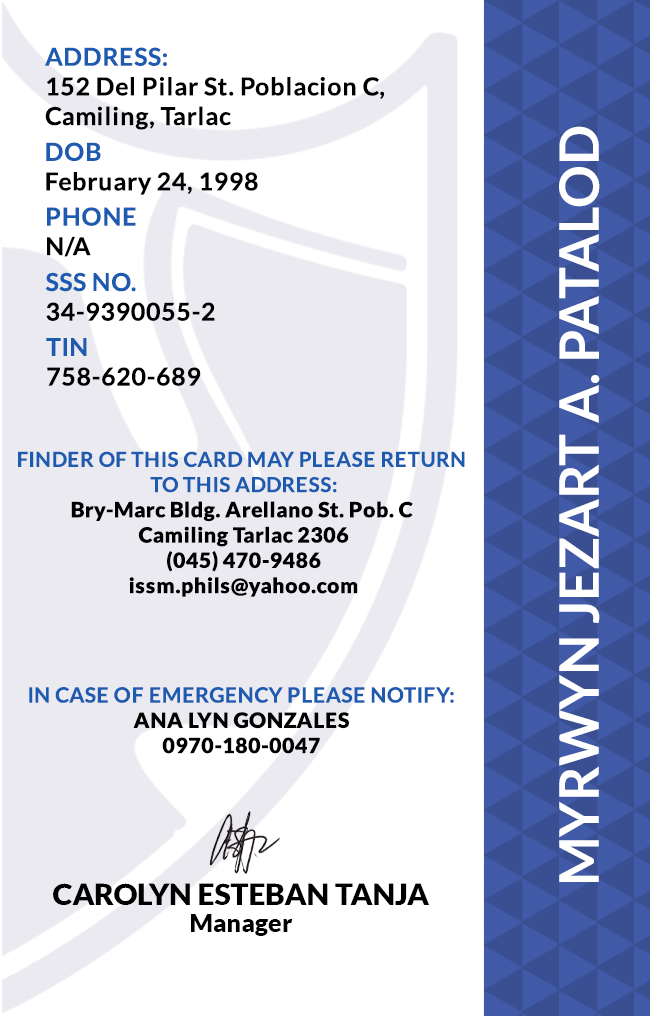
<style>
.page{position:relative;width:650px;height:1016px;background:#ffffff}
.page>*{position:absolute;margin:0}
.t1{font:24.7px/29.6px "Lato-Bold";letter-spacing:0.025em;color:#000000}
.t2{font:24.7px/29.6px "Lato-Bold";letter-spacing:0.025em;color:#1c5bb0}
.t3{font:54.2px "Lato-Bold";color:#ffffff}
.t4{font:24.7px/29.6px "Lato-Bold";letter-spacing:0.025em;color:#202627}
.t5{font:24.7px/29.6px "Lato-Bold";letter-spacing:0.025em}
.t6{font:21.1px "Lato-Black";letter-spacing:0.025em}
.t7{font:20.5px/25.3px "Lato-Bold";letter-spacing:0.025em;text-transform:uppercase}
.t8{font:21.1px/25.3px "Lato-Bold";letter-spacing:0.025em}
.t9{font:29.5px "Lato-Black";color:#000000}
.t10{font:25px "Lato-Black";color:#000000}
</style>
<div class="page">
<p class="t1" style="left:45px;top:47px;width:340px;height:83px"><span class="t2">ADDRESS:<br></span>152 Del Pilar St. Poblacion C, <br>Camiling, Tarlac</p>
<p class="t3" style="left:559px;top:126px;width:41px;height:756px;rotate:-90deg">MYRWYN JEZART A. PATALOD</p>
<p class="t1" style="left:46px;top:142px;width:212px;height:53px">DOB<br>February 24, 1998</p>
<p class="t2" style="left:47px;top:207px;width:89px;height:50px">PHONE <br><span class="t4">N/A</span></p>
<p class="t5" style="left:45px;top:272px;width:170px;height:49px">SSS NO.<br>34-9390055-2</p>
<p class="t1" style="left:46px;top:338px;width:155px;height:48px">TIN<br>758-620-689</p>
<p class="t6" style="left:18px;top:451px;width:447px;height:146px;text-align:center"><span class="t7">Finder of this card may please return <br>to this address:<br></span>Bry-Marc Bldg. Arellano St. Pob. C <br>Camiling Tarlac 2306<br>(045) 470-9486<br>issm.phils@yahoo.com</p>
<p class="t8" style="left:29px;top:687px;width:425px;height:67px;text-align:center">IN CASE OF EMERGENCY PLEASE NOTIFY:<br><span class="t6">ANA LYN GONZALES<br>0970-180-0047</span></p>
<p class="t9" style="left:53px;top:883px;width:376px;height:22px">CAROLYN ESTEBAN TANJA</p>
<p class="t10" style="left:191px;top:914px;width:102px;height:22px">Manager</p>
</div>
